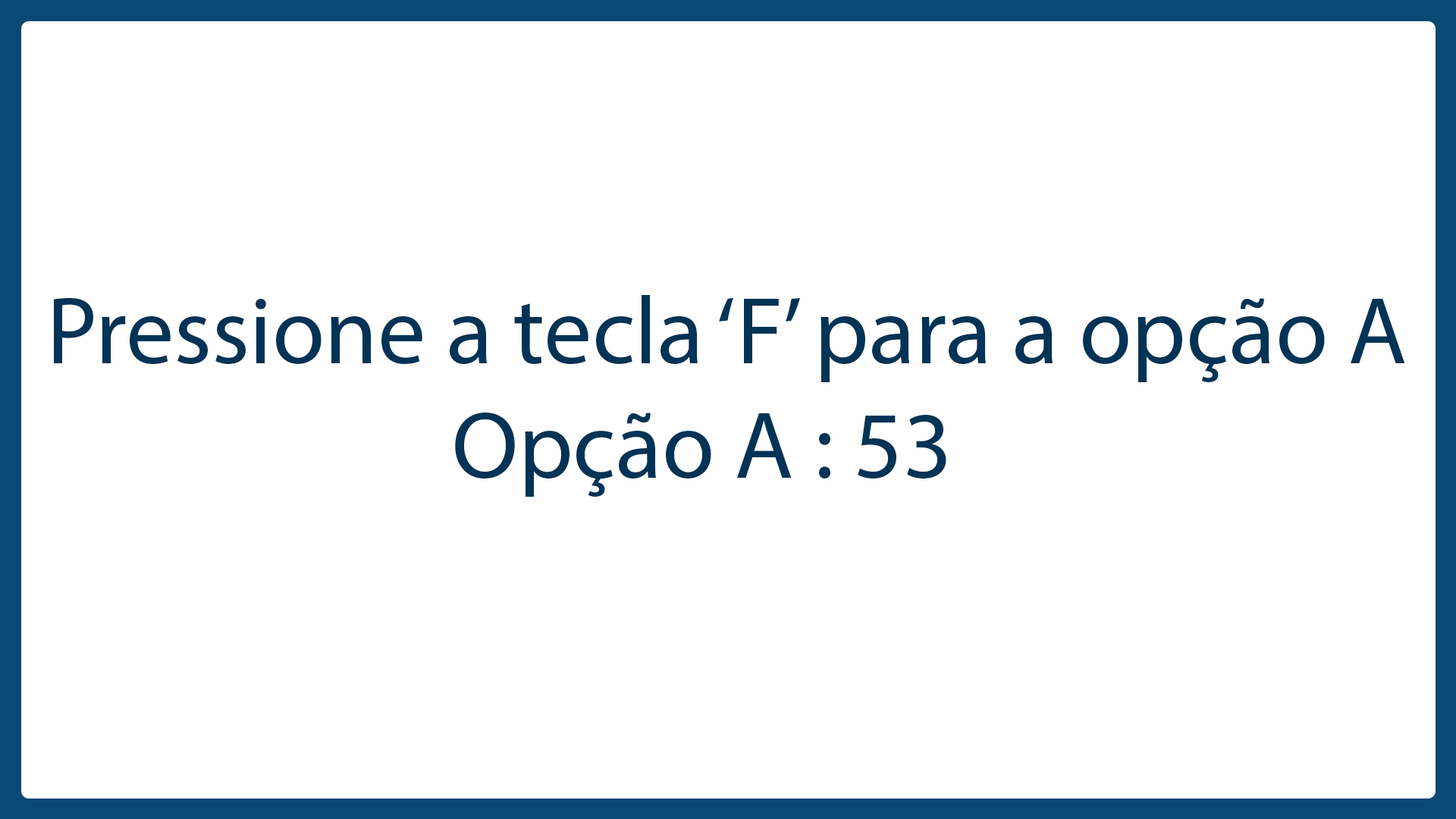
<style>
.page{position:relative;width:1456px;height:819px;background:#ffffff}
.page>*{position:absolute;margin:0}
.t1{font:95.9px "MyriadPro-Regular";color:#003355}
</style>
<div class="page">
<p class="t1" style="left:54px;top:295px;width:1351px;height:202px">Pressione a tecla ‘F’ para a opção A<br>                    Opção A : 53</p>
</div>
